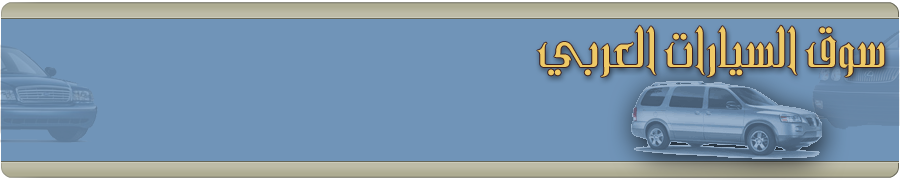
<style>
.page{position:relative;width:900px;height:180px;background:#7094b8}
.page>*{position:absolute;margin:0}
.t1{font:48px "SC_REHAN";color:#eec966}
</style>
<div class="page">
<p class="t1" style="left:537px;top:25px;width:348px;height:52px">سوق السيارات العربي</p>
</div>
